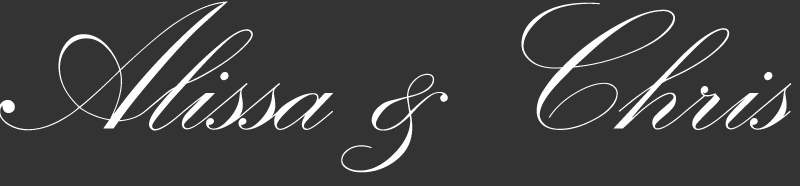
<style>
.page{position:relative;width:800px;height:186px;background:#333333}
.page>*{position:absolute;margin:0}
.t1{font:185.5px "KunstlerScript";color:#fefefe}
</style>
<div class="page">
<p class="t1" style="left:0px;top:1px;width:792px;height:172px">Alissa &amp; Chris</p>
</div>
